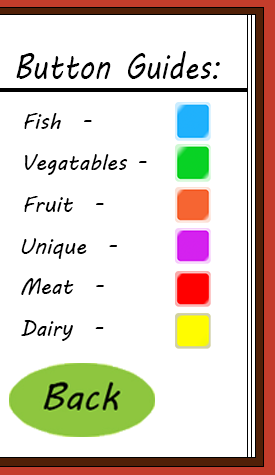
<style>
.page{position:relative;width:275px;height:475px;background:#ffffff}
.page>*{position:absolute;margin:0}
.t1{font:36px "MVBoli";color:#000000;scale:0.81 1}
.t2{font:21.9px "MVBoli";color:#000000}
</style>
<div class="page">
<p class="t1" style="left:16px;top:51px;width:204px;height:28px">Button Guides:</p>
<p class="t2" style="left:24px;top:113px;width:68px;height:16px">Fish  -</p>
<p class="t2" style="left:25px;top:154px;width:122px;height:21px">Vegatables -</p>
<p class="t2" style="left:24px;top:196px;width:80px;height:16px">Fruit  -</p>
<p class="t2" style="left:21px;top:238px;width:96px;height:21px">Unique  -</p>
<p class="t2" style="left:21px;top:278px;width:83px;height:17px">Meat  -</p>
<p class="t2" style="left:21px;top:320px;width:83px;height:21px">Dairy  -</p>
</div>
